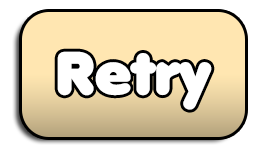
<style>
.page{position:relative;width:267px;height:150px;background:#ffffff}
.page>*{position:absolute;margin:0}
.t1{font:59.6px "Debussy";color:#ffffff}
</style>
<div class="page">
<p class="t1" style="left:57px;top:51px;width:155px;height:59px">Retry</p>
</div>
